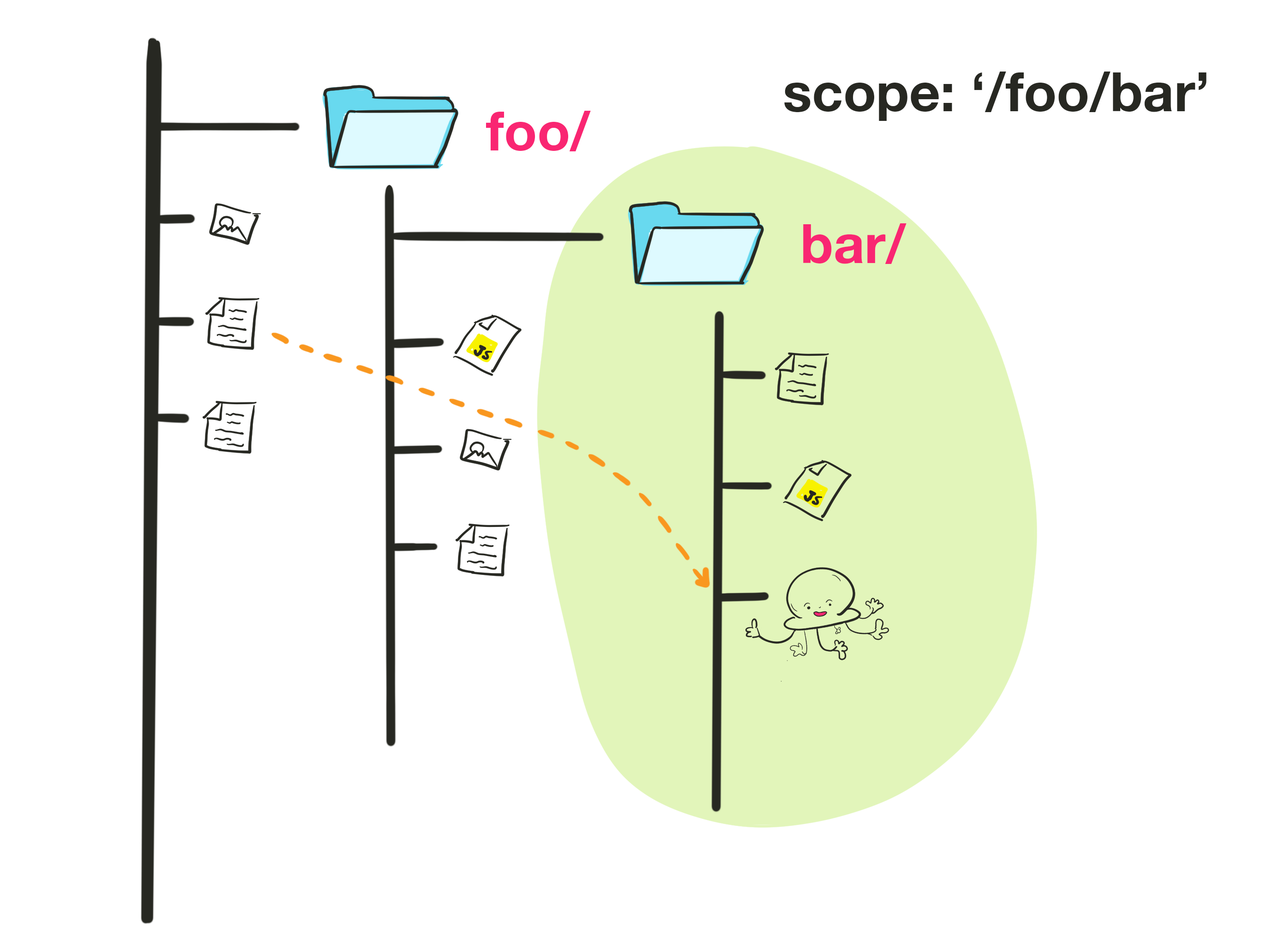
<style>
.page{position:relative;width:1261px;height:945px;background:#ffffff}
.page>*{position:absolute;margin:0}
.t1{font:54.2px "HelveticaNeue-Bold";color:#272822}
.t2{font:54.2px "HelveticaNeue-Bold";color:#f92672}
</style>
<div class="page">
<p class="t1" style="left:784px;top:72px;width:423px;height:49px">scope: ‘/foo/bar’</p>
<p class="t2" style="left:486px;top:111px;width:105px;height:40px">foo/</p>
<p class="t2" style="left:803px;top:223px;width:104px;height:41px">bar/</p>
</div>
